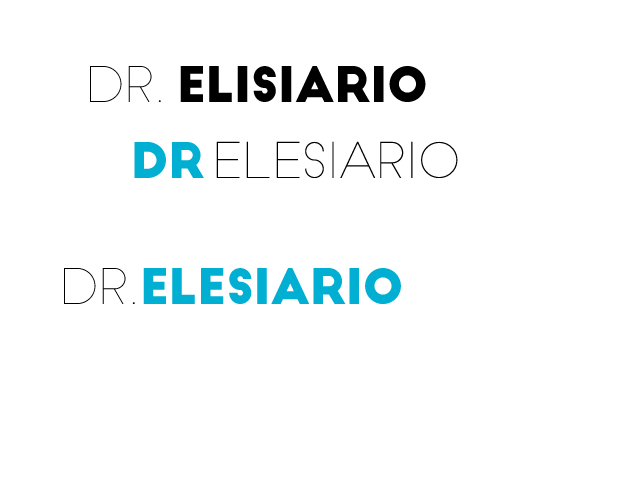
<style>
.page{position:relative;width:640px;height:480px;background:#ffffff}
.page>*{position:absolute;margin:0}
.t1{font:48px "SlimJoe";letter-spacing:-0.01em;color:#000000}
.t2{font:48px "BigJohn";letter-spacing:-0.01em;color:#000000}
.t3{font:48px "BigJohn";letter-spacing:-0.01em;color:#00afd1}
</style>
<div class="page">
<p class="t1" style="left:90px;top:66px;width:71px;height:36px">DR.</p>
<p class="t2" style="left:180px;top:66px;width:246px;height:36px">ElisiArio</p>
<p class="t3" style="left:134px;top:142px;width:70px;height:36px">DR</p>
<p class="t1" style="left:216px;top:141px;width:242px;height:37px">ElEsiArio</p>
<p class="t1" style="left:64px;top:268px;width:71px;height:36px">DR.</p>
<p class="t3" style="left:143px;top:268px;width:258px;height:36px">ElEsiArio</p>
</div>
